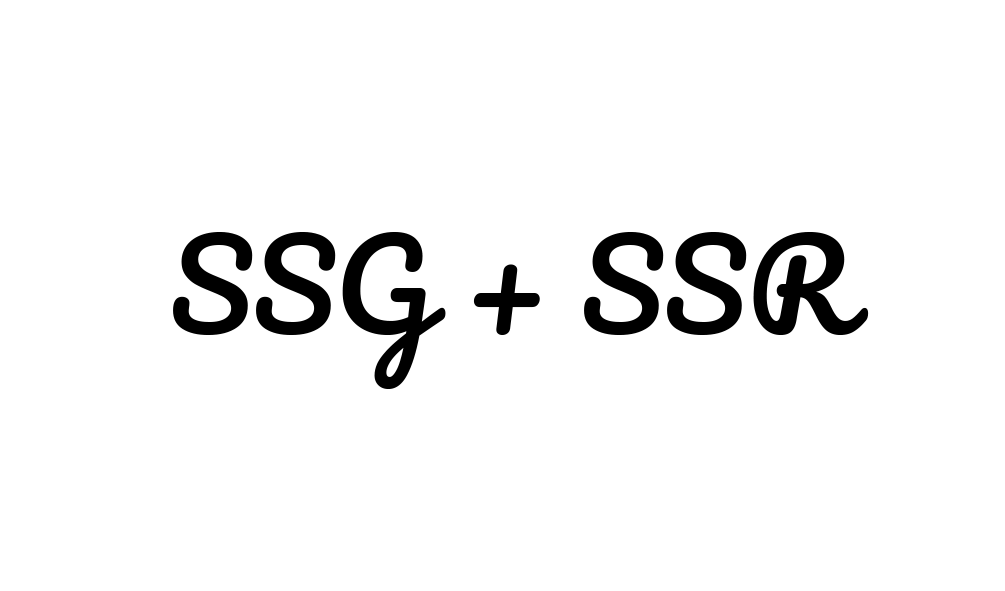
<style>
.page{position:relative;width:1005px;height:591px;background:#ffffff}
.page>*{position:absolute;margin:0}
.t1{font:120px "Pacifico-Regular";color:#000000}
</style>
<div class="page">
<p class="t1" style="left:173px;top:232px;width:696px;height:157px">SSG + SSR</p>
</div>
